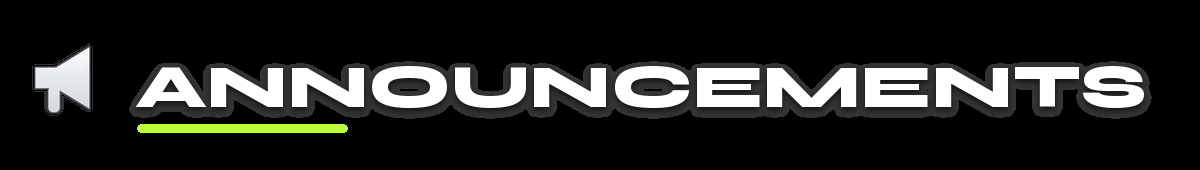
<style>
.page{position:relative;width:1200px;height:170px;background:#000000}
.page>*{position:absolute;margin:0}
.t1{font:62px "Syne-ExtraBold";color:#ffffff}
</style>
<div class="page">
<p class="t1" style="left:135px;top:66px;width:1009px;height:42px">ANNOUNCEMENTS</p>
</div>
